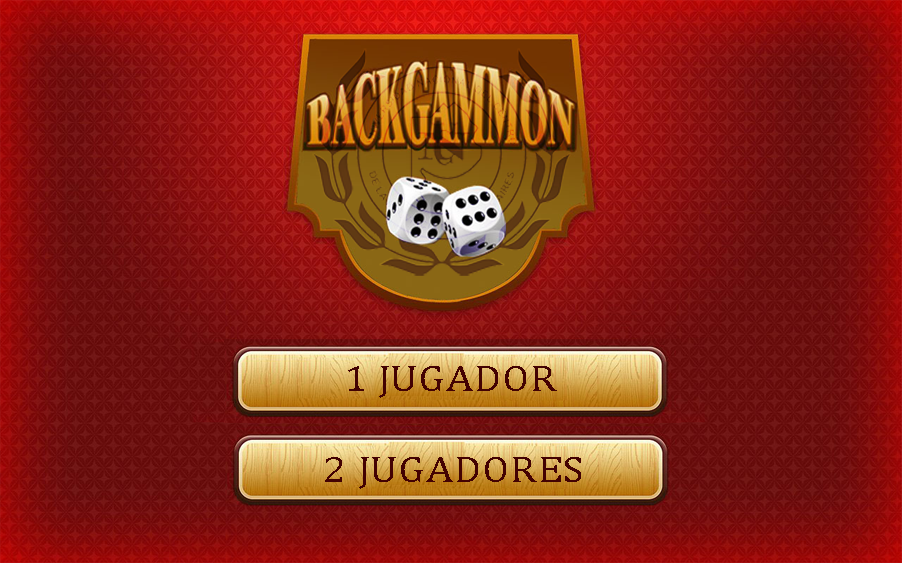
<style>
.page{position:relative;width:902px;height:563px}
.page>*{position:absolute;margin:0}
.t1{font:37px "CambriaMath";color:#430202;scale:1.16 1}
</style>
<div class="page">
<p class="t1" style="left:348px;top:366px;width:209px;height:32px">1 JUGADOR</p>
<p class="t1" style="left:325px;top:457px;width:256px;height:32px">2 JUGADORES</p>
</div>
